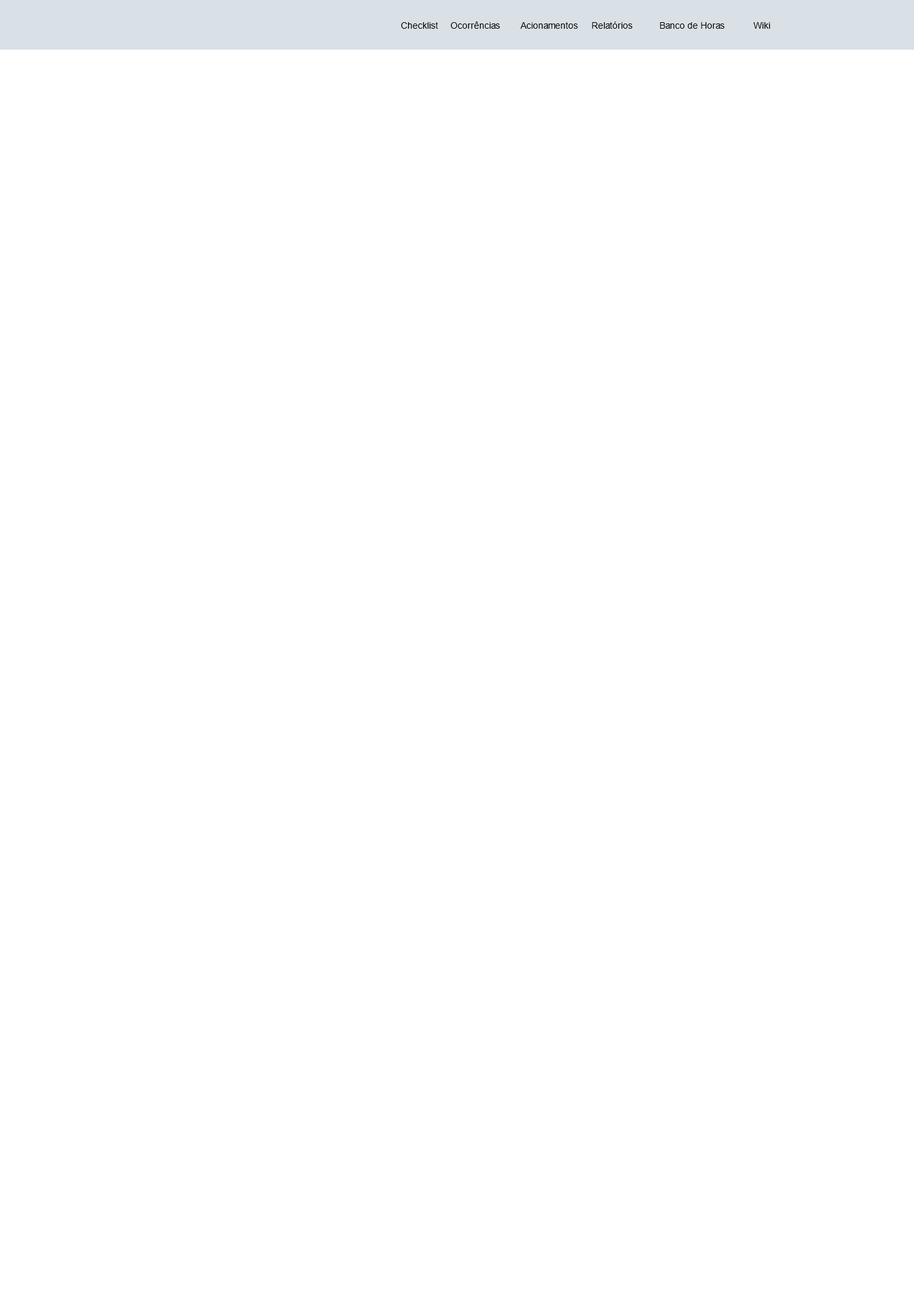
<style>
.page{position:relative;width:914px;height:1305px;background:#ffffff}
.page>*{position:absolute;margin:0}
.t1{font:9.1px "ArialMT";color:#000000}
</style>
<div class="page">
<p class="t1" style="left:401px;top:22px;width:369px;height:7px">Checklist  Ocorrências  Acionamentos  Relatórios  Banco de Horas  Wiki</p>
</div>
